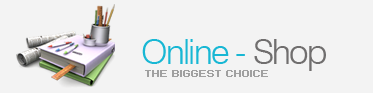
<style>
.page{position:relative;width:373px;height:93px;background:#f3f3f3}
.page>*{position:absolute;margin:0}
.t1{font:35px "Swiss721BT-Light";letter-spacing:-0.05em;color:#18b7d4}
.t2{font:35px "Swiss721BT-Light";letter-spacing:-0.05em;color:#706e6e}
.t3{font:8px "Standard0753";color:#a0a0a0;text-transform:uppercase;font-weight:bold}
</style>
<div class="page">
<p class="t1" style="left:142px;top:39px;width:184px;height:32px">Online -<span class="t2"> Shop</span></p>
<p class="t3" style="left:145px;top:70px;width:123px;height:7px">the biggest choice</p>
</div>
